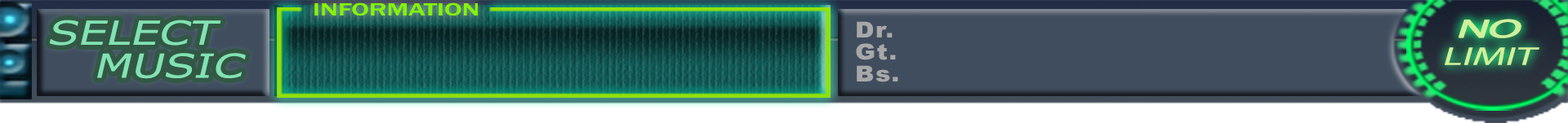
<style>
.page{position:relative;width:1568px;height:123px;background:#404d5e}
.page>*{position:absolute;margin:0}
.t1{font:18px "FranklinGothic-Medium";color:#84f400;scale:1.52 1}
.t2{font:33.1px/33.1px "MSReferenceSansSerif";color:#82e2b2;font-style:italic;scale:1.33 1}
.t3{font:22.1px "Arial-Black";letter-spacing:0.05em;color:#a7a8a7;scale:1.11 1}
.t4{font:25.8px/27.6px "MyriadPro-Regular";color:#d0f09a;font-style:italic;scale:1.6 1}
.t5{font:25.8px/27.6px "MyriadPro-Regular";letter-spacing:-0.05em;color:#d0f09a;font-weight:bold;font-style:italic;scale:1.86 1}
</style>
<div class="page">
<p class="t1" style="left:314px;top:2px;width:164px;height:14px">INFORMATION</p>
<p class="t2" style="left:49px;top:20px;width:197px;height:59px">SELECT<br>   MUSIC</p>
<p class="t3" style="left:856px;top:21px;width:42px;height:61px">Dr.<br>Gt.<br>Bs.</p>
<p class="t4" style="left:1445px;top:19px;width:94px;height:46px;text-align:center"><span class="t5">NO<br></span>LIMIT</p>
</div>
